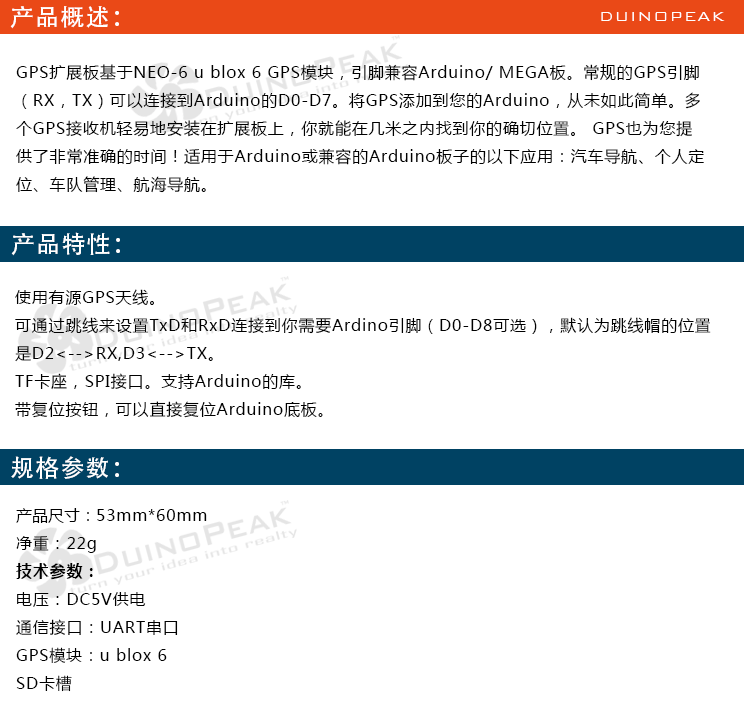
<style>
.page{position:relative;width:744px;height:708px;background:#ffffff}
.page>*{position:absolute;margin:0}
.t1{font:24px "AdobeHeitiStd-Regular";letter-spacing:0.05em;color:#ffffff}
.t2{font:18px "BankGothicBT-Light";letter-spacing:0.05em;color:#ffffff}
.t3{font:16px "MicrosoftYaHei";letter-spacing:0.05em;color:#000000}
.t4{font:16px "MicrosoftYaHei";color:#000000}
.t5{font:16px "MicrosoftYaHei-Bold";letter-spacing:0.05em;color:#000000}
</style>
<div class="page">
<p class="t1" style="left:10px;top:6px;width:109px;height:23px">产品概述：</p>
<p class="t2" style="left:601px;top:12px;width:124px;height:9px">DUINOPEAK</p>
<p class="t3" style="left:16px;top:64px;width:688px;height:129px">GPS扩展板基于NEO-6 u blox 6 GPS模块，引脚兼容Arduino/ MEGA板。常规的GPS引脚<br>（RX，TX）可以连接到Arduino的D0-D7。将GPS添加到您的Arduino，从未如此简单。多<br>个GPS接收机轻易地安装在扩展板上，你就能在几米之内找到你的确切位置。 GPS也为您提<br>供了非常准确的时间！适用于Arduino或兼容的Arduino板子的以下应用：汽车导航、个人定<br>位、车队管理、航海导航。</p>
<p class="t1" style="left:11px;top:232px;width:109px;height:24px">产品特性：</p>
<p class="t3" style="left:15px;top:289px;width:696px;height:129px">使用有源GPS天线。<br>可通过跳线来设置TxD和RxD连接到你需要Ardino引脚（D0-D8可选），默认为跳线帽的位置<br>是D2&lt;--&gt;RX,D3&lt;--&gt;TX。<br>TF卡座，SPI接口。支持Arduino的库。<br>带复位按钮，可以直接复位Arduino底板。</p>
<p class="t1" style="left:11px;top:456px;width:108px;height:23px">规格参数：</p>
<p class="t3" style="left:16px;top:508px;width:191px;height:184px"><span class="t4">产品尺寸：</span>53mm*60mm<br>净重：22g<br><span class="t5">技术参数：<br></span>电压：DC5V供电<br>通信接口：UART串口<br>GPS模块：u blox 6<br>SD卡槽</p>
</div>
